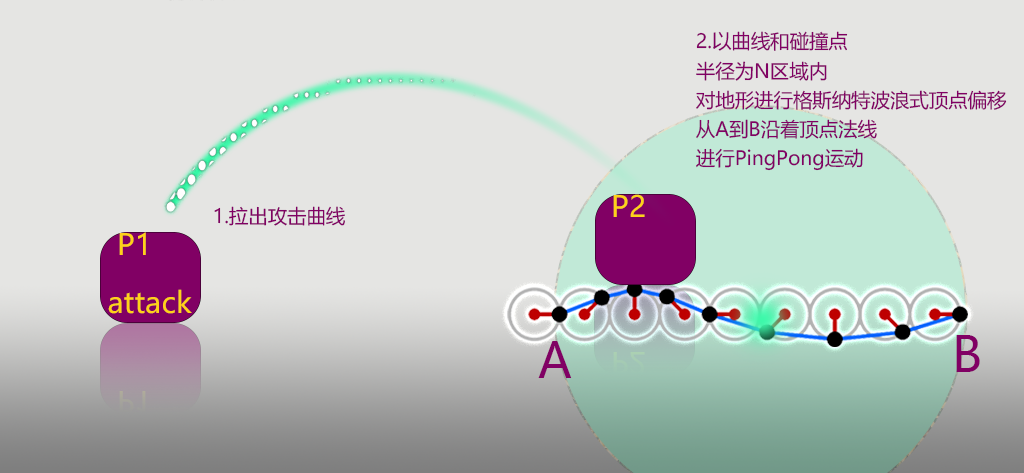
<style>
.page{position:relative;width:1024px;height:473px;background:#e5e5e3}
.page>*{position:absolute;margin:0}
.t1{font:19.4px/29.1px "MicrosoftYaHeiUI";color:#810064}
.t2{font:29.1px "MicrosoftYaHeiUI";color:#ffd119}
.t3{font:19.4px "MicrosoftYaHeiUI";color:#810064}
.t4{font:29.1px/29.1px "MicrosoftYaHeiUI";color:#ffd119}
.t5{font:48px "MicrosoftYaHeiUI";color:#810064}
.t6{font:29.1px "MicrosoftYaHeiUI";color:#a3cab3}
.t7{font:29.1px "MicrosoftYaHeiUI";color:#a3a09b}
</style>
<div class="page">
<p class="t1" style="left:696px;top:31px;width:311px;height:140px">2.以曲线和碰撞点<br>半径为N区域内<br>对地形进行格斯纳特波浪式顶点偏移<br>从A到B沿着顶点法线 <br>进行PingPong运动</p>
<p class="t2" style="left:613px;top:194px;width:32px;height:23px">P2</p>
<p class="t3" style="left:214px;top:206px;width:131px;height:20px">1.拉出攻击曲线</p>
<p class="t4" style="left:108px;top:232px;width:84px;height:82px">P1<br>  attack</p>
<p class="t5" style="left:538px;top:341px;width:34px;height:37px">A</p>
<p class="t5" style="left:956px;top:335px;width:24px;height:37px">B</p>
<p class="t6" style="left:613px;top:352px;width:32px;height:23px">P2</p>
<p class="t7" style="left:119px;top:391px;width:27px;height:23px">P1</p>
</div>
